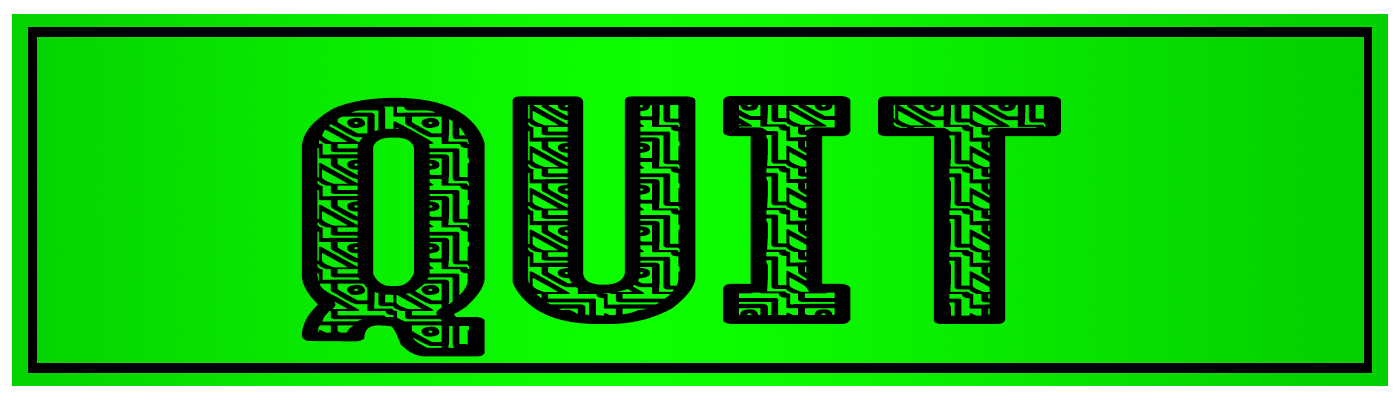
<style>
.page{position:relative;width:1400px;height:400px;background:#000000}
.page>*{position:absolute;margin:0}
.t1{font:213.6px "CalenduliaSt";color:#000000;scale:1.78 1}
</style>
<div class="page">
<p class="t1" style="left:301px;top:96px;width:760px;height:261px">QUIT</p>
</div>
